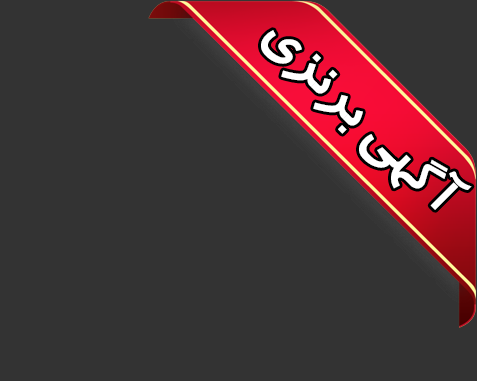
<style>
.page{position:relative;width:477px;height:381px;background:#333333}
.page>*{position:absolute;margin:0}
.t1{font:54.4px "BTrafficBold"}
.t2{font:54.4px "BTrafficBold";color:#ffffff}
</style>
<div class="page">
<p class="t1" style="left:241px;top:11px;width:231px;height:199px;rotate:45deg">آگهی نقره ای</p>
<p class="t2" style="left:261px;top:30px;width:211px;height:180px;rotate:45deg">آگهی برنزی</p>
</div>
